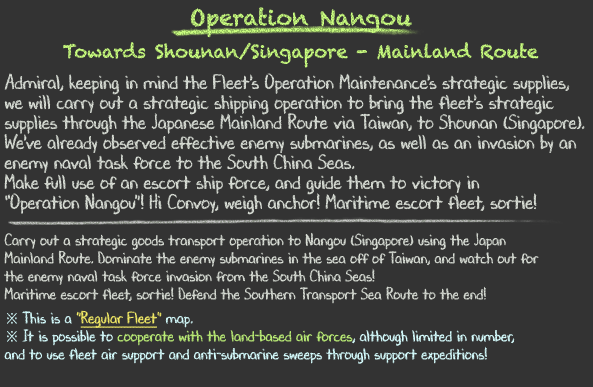
<style>
.page{position:relative;width:593px;height:387px;background:#333333}
.page>*{position:absolute;margin:0}
.t1{font:18px/36px "Chalkduster"}
.t2{font:22px/36px "Chalkduster"}
.t3{font:20px/20px "DJBChalkItUp";color:#d9ded6;scale:0.9 1}
.t4{font:16px/18px "DJBChalkItUp";color:#d9ded6;scale:0.9 1}
.t5{font:16px/24px "DJBChalkItUp";color:#d9ded6;scale:0.9 1}
.t6{font:16px/18px "TimesNewRomanPSMT";color:#d7feff;scale:0.9 1}
.t7{font:16px/18px "DJBChalkItUp";color:#d7feff;scale:0.9 1}
.t8{font:16px/18px "DJBChalkItUp";color:#f5ed68;scale:0.9 1}
.t9{font:16px/18px "DJBChalkItUp";color:#f5ed68;text-decoration:underline;scale:0.9 1}
.t10{font:16px/18px "DJBChalkItUp";color:#bdef78;scale:0.9 1}
</style>
<div class="page">
<p class="t1" style="left:63px;top:7px;width:476px;height:61px;text-align:center"><span class="t2">Operation Nangou<br></span>Towards Shounan/Singapore - Mainland Route</p>
<p class="t3" style="left:4px;top:73px;width:581px;height:291px">Admiral, keeping in mind the Fleet's Operation Maintenance's strategic supplies,<br>we will carry out a strategic shipping operation to bring the fleet's strategic<br>supplies through the Japanese Mainland Route via Taiwan, to Shounan (Singapore).<br>We've already observed effective enemy submarines, as well as an invasion by an<br>enemy naval task force to the South China Seas.<br>Make full use of an escort ship force, and guide them to victory in<br>“Operation Nangou”! Hi Convoy, weigh anchor! Maritime escort fleet, sortie!<br><br><span class="t4">Carry out a strategic goods transport operation to Nangou (Singapore) using the Japan <br>Mainland Route. Dominate the enemy submarines in the sea off of Taiwan, and watch out for<br>the enemy naval task force invasion from the South China Seas!<br></span><span class="t5">Maritime escort fleet, sortie! Defend the Southern Transport Sea Route to the end!<br></span><span class="t6">※ </span><span class="t7">This is a </span><span class="t8">"</span><span class="t9">Regular Fleet</span><span class="t8">"</span><span class="t7"> map.<br></span><span class="t6">※ </span><span class="t7">It is possible to </span><span class="t10">cooperate with the land-based air forces</span><span class="t7">, although limited in number,<br>and to use fleet air support and anti-submarine sweeps through support expeditions!</span></p>
</div>
